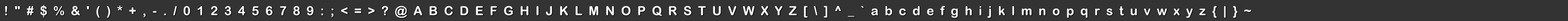
<style>
.page{position:relative;width:1568px;height:21px;background:#333333}
.page>*{position:absolute;margin:0}
.t1{font:12.5px "ArialRoundedMTBold";color:#f9f9f9}
</style>
<div class="page">
<p class="t1" style="left:5px;top:5px;width:1246px;height:13px">!  "  #  $  %  &amp;  '  (  )  *  +  ,  -  .  /  0  1  2  3  4  5  6  7  8  9  :  ;  &lt;  =  &gt;  ?  @  A  B  C  D  E  F  G  H  I  J  K  L  M  N  O  P  Q  R  S  T  U  V  W  X  Y  Z  [  \  ]  ^  _  `  a  b  c  d  e  f  g  h  i  j  k  l  m  n  o  p  q  r  s  t  u  v  w  x  y  z  {  |  }  ~</p>
</div>
